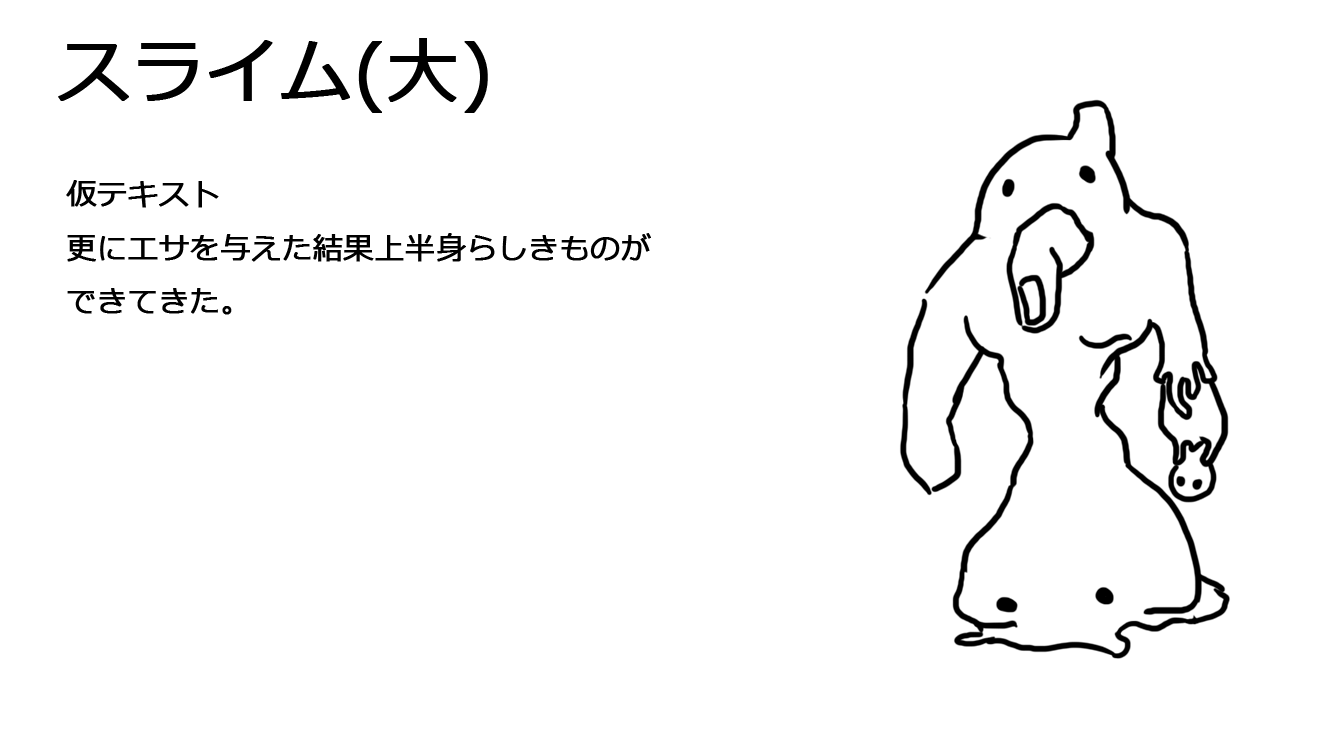
<style>
.page{position:relative;width:1334px;height:750px;background:#ffffff}
.page>*{position:absolute;margin:0}
.t1{font:72px "Meiryo";color:#000000;font-weight:bold}
.t2{font:30px "Meiryo";color:#000000;font-weight:bold}
</style>
<div class="page">
<p class="t1" style="left:58px;top:38px;width:430px;height:75px">スライム(大)</p>
<p class="t2" style="left:66px;top:180px;width:585px;height:135px">仮テキスト<br>更にエサを与えた結果上半身らしきものが<br>できてきた。</p>
</div>
